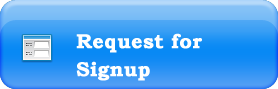
<style>
.page{position:relative;width:278px;height:89px}
.page>*{position:absolute;margin:0}
.t1{font:20px/28px "BookmanOldStyle-Bold";color:#ffffff;font-weight:bold}
</style>
<div class="page">
<p class="t1" style="left:76px;top:33px;width:126px;height:48px">Request for<br>Signup</p>
</div>
